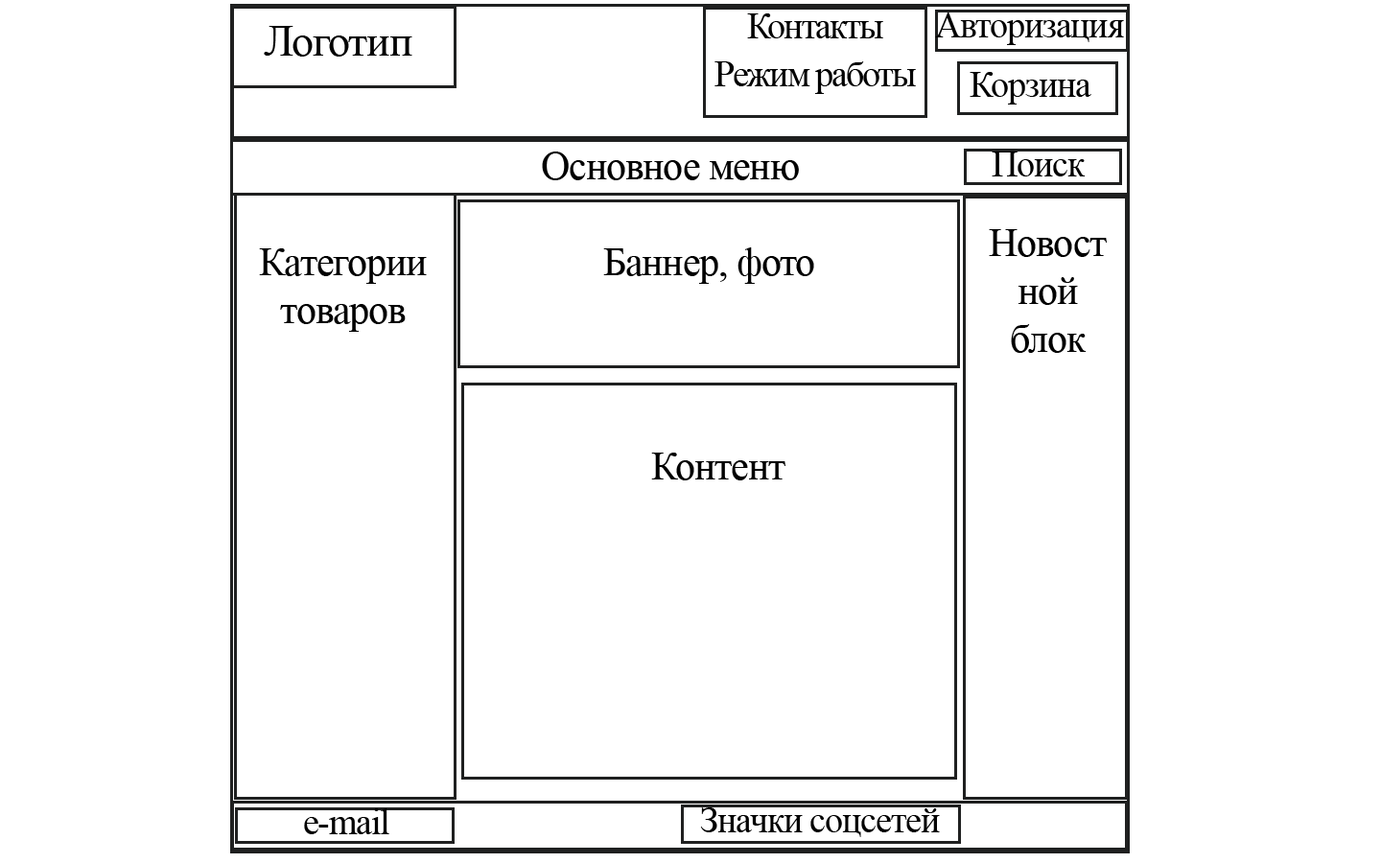
<style>
.page{position:relative;width:1381px;height:863px;background:#ffffff}
.page>*{position:absolute;margin:0}
.t1{font:36px/48px "TimesNewRomanPSMT";letter-spacing:-0.05em;color:#000000}
.t2{font:36px "TimesNewRomanPSMT";letter-spacing:-0.025em;color:#000000}
.t3{font:44px "TimesNewRomanPSMT";letter-spacing:-0.025em;color:#000000}
.t4{font:40px "TimesNewRomanPSMT";letter-spacing:-0.025em;color:#000000}
</style>
<div class="page">
<p class="t1" style="left:715px;top:13px;width:201px;height:81px;text-align:center">Контакты<br>Режим работы</p>
<p class="t2" style="left:935px;top:12px;width:189px;height:33px">Авторизация</p>
<p class="t3" style="left:264px;top:26px;width:148px;height:31px">Логотип</p>
<p class="t2" style="left:970px;top:72px;width:122px;height:33px">Корзина</p>
<p class="t4" style="left:542px;top:152px;width:257px;height:28px">Основное меню</p>
<p class="t2" style="left:992px;top:152px;width:94px;height:24px">Поиск</p>
<p class="t4" style="left:989px;top:229px;width:118px;height:124px;text-align:center">Новостной<br>блок</p>
<p class="t4" style="left:259px;top:248px;width:168px;height:84px;text-align:center">Категории товаров</p>
<p class="t4" style="left:603px;top:247px;width:211px;height:37px">Баннер, фото</p>
<p class="t4" style="left:651px;top:453px;width:135px;height:28px">Контент</p>
<p class="t2" style="left:304px;top:809px;width:85px;height:26px">e-mail</p>
<p class="t2" style="left:700px;top:808px;width:240px;height:29px">Значки соцсетей</p>
</div>
